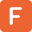
<style>
.page{position:relative;width:32px;height:32px;background:#ec6431}
.page>*{position:absolute;margin:0}
.t1{font:27px "Omnes-Medium";color:#ffffff}
</style>
<div class="page">
<p class="t1" style="left:9px;top:7px;width:13px;height:18px">F</p>
</div>
